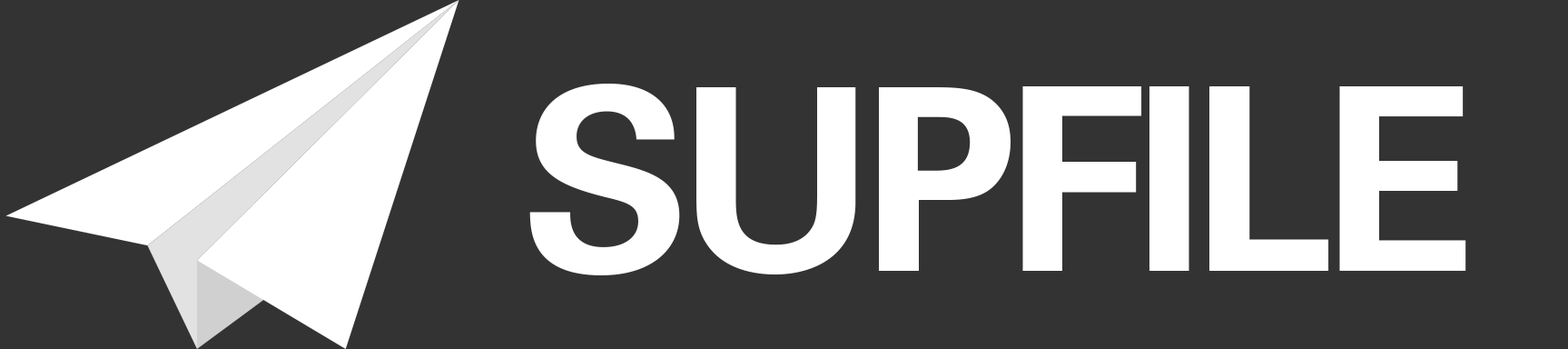
<style>
.page{position:relative;width:1568px;height:349px;background:#333333}
.page>*{position:absolute;margin:0}
.t1{font:254.3px "UniversLTStd-Bold";letter-spacing:-0.05em;color:#ffffff}
</style>
<div class="page">
<p class="t1" style="left:529px;top:84px;width:937px;height:191px">SUPFILE</p>
</div>
